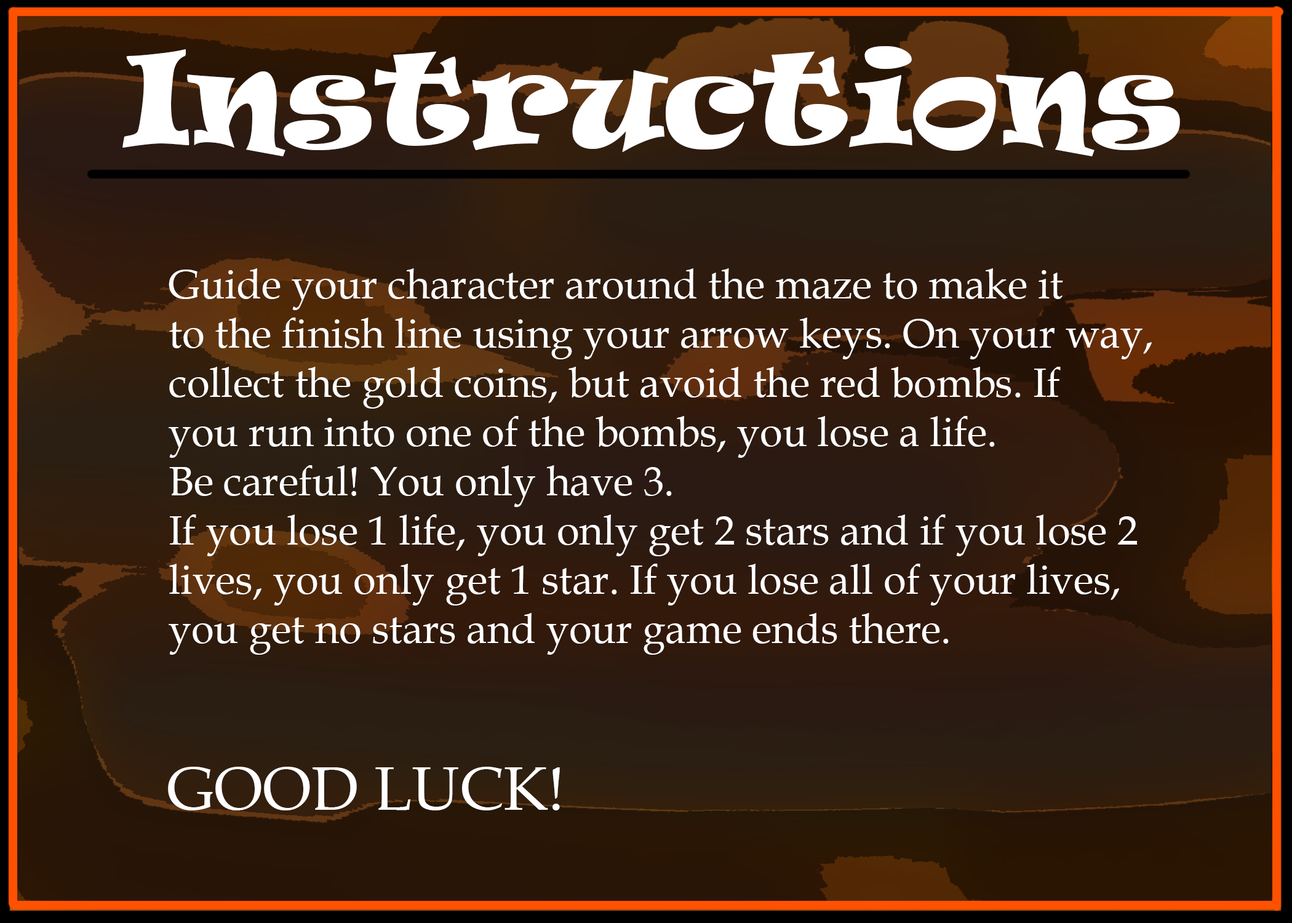
<style>
.page{position:relative;width:1292px;height:923px}
.page>*{position:absolute;margin:0}
.t1{font:123.1px "Ravie";color:#ffffff}
.t2{font:41px "BookAntiqua";color:#ffffff}
.t3{font:61.5px "BookAntiqua";color:#ffffff}
</style>
<div class="page">
<p class="t1" style="left:122px;top:46px;width:1058px;height:110px">Instructions</p>
<p class="t2" style="left:169px;top:268px;width:983px;height:387px">Guide your character around the maze to make it <br>to the finish line using your arrow keys. On your way, <br>collect the gold coins, but avoid the red bombs. If <br>you run into one of the bombs, you lose a life. <br>Be careful! You only have 3. <br>If you lose 1 life, you only get 2 stars and if you lose 2 <br>lives, you only get 1 star. If you lose all of your lives,<br>you get no stars and your game ends there.</p>
<p class="t3" style="left:168px;top:767px;width:392px;height:43px">GOOD LUCK!</p>
</div>
